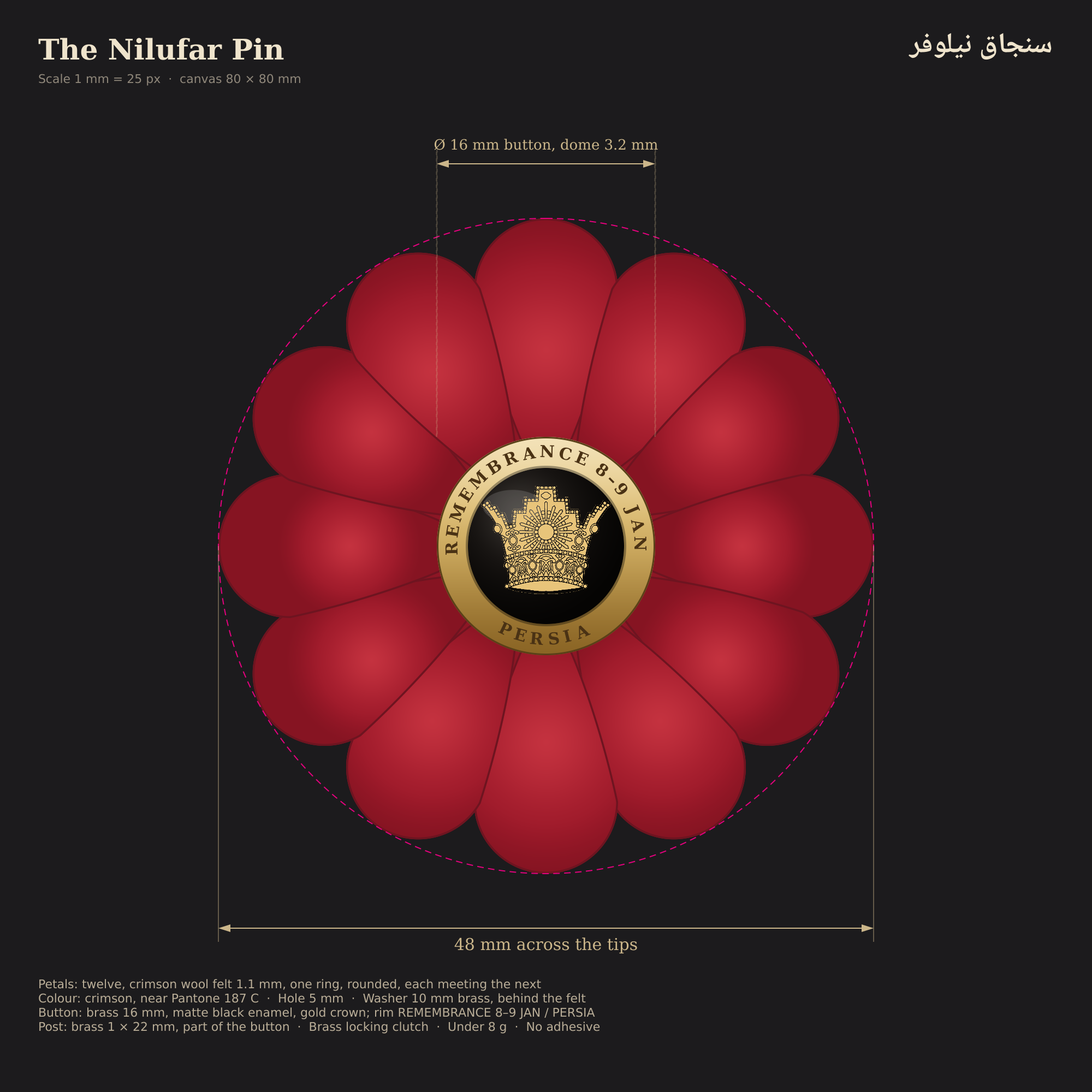
<style>
.page{position:relative;width:1092px;height:1092px;background:#1c1b1d}
.page>*{position:absolute;margin:0}
.t1{font:28.4px "Noto Naskh Arabic";color:#efe4cc}
.t2{font:28.4px "DejaVuSerif-Bold";color:#efe4cc}
.t3{font:12px "DejaVuSans";color:#8f877a}
.t4{font:14.2px "DejaVuSerif";color:#cbb68a}
.t5{font:16.4px "DejaVuSerif-Bold";color:#4a3214}
.t6{font:16.4px "DejaVuSerif";color:#cbb68a}
.t7{font:12px "DejaVuSans";color:#b9ad97}
</style>
<div class="page">
<p class="t1" style="left:907px;top:22px;width:147px;height:50px">سنجاق نیلوفر</p>
<p class="t2" style="left:38px;top:33px;width:248px;height:35px">The Nilufar Pin</p>
<p class="t3" style="left:38px;top:72px;width:264px;height:15px">Scale 1 mm = 25 px  ·  canvas 80 × 80 mm</p>
<p class="t4" style="left:404px;top:136px;width:284px;height:22px">Ø 16 mm button, dome 3.2 mm</p>
<p class="t5" style="left:523px;top:447px;width:14px;height:14px;rotate:-10deg">A</p>
<p class="t5" style="left:540px;top:445px;width:14px;height:13px;rotate:1deg">N</p>
<p class="t5" style="left:559px;top:447px;width:13px;height:13px;rotate:12deg">C</p>
<p class="t5" style="left:485px;top:460px;width:16px;height:16px;rotate:-33deg">B</p>
<p class="t5" style="left:502px;top:452px;width:17px;height:14px;rotate:-22deg">R</p>
<p class="t5" style="left:574px;top:450px;width:15px;height:16px;rotate:23deg">E</p>
<p class="t5" style="left:468px;top:470px;width:21px;height:20px;rotate:-45deg">M</p>
<p class="t5" style="left:596px;top:463px;width:12px;height:14px;rotate:37deg">8</p>
<p class="t5" style="left:608px;top:477px;width:7px;height:7px;rotate:45deg">–</p>
<p class="t5" style="left:614px;top:483px;width:14px;height:12px;rotate:53deg">9</p>
<p class="t5" style="left:458px;top:487px;width:16px;height:16px;rotate:-57deg">E</p>
<p class="t5" style="left:449px;top:502px;width:17px;height:21px;rotate:-69deg">M</p>
<p class="t5" style="left:623px;top:504px;width:17px;height:10px;rotate:67deg">J</p>
<p class="t5" style="left:631px;top:520px;width:13px;height:13px;rotate:78deg">A</p>
<p class="t5" style="left:446px;top:525px;width:14px;height:13px;rotate:-81deg">E</p>
<p class="t5" style="left:445px;top:541px;width:13px;height:14px;rotate:-91deg">R</p>
<p class="t5" style="left:634px;top:537px;width:12px;height:13px;rotate:89deg">N</p>
<p class="t5" style="left:498px;top:621px;width:14px;height:14px;rotate:26deg">P</p>
<p class="t5" style="left:513px;top:627px;width:14px;height:15px;rotate:16deg">E</p>
<p class="t5" style="left:562px;top:629px;width:10px;height:14px;rotate:-14deg">I</p>
<p class="t5" style="left:578px;top:625px;width:13px;height:15px;rotate:-23deg">A</p>
<p class="t5" style="left:530px;top:632px;width:13px;height:13px;rotate:5deg">R</p>
<p class="t5" style="left:549px;top:632px;width:10px;height:13px;rotate:-5deg">S</p>
<p class="t6" style="left:437px;top:935px;width:218px;height:24px">48 mm across the tips</p>
<p class="t7" style="left:38px;top:977px;width:1016px;height:99px">Petals: twelve, crimson wool felt 1.1 mm, one ring, rounded, each meeting the next<br>Colour: crimson, near Pantone 187 C  ·  Hole 5 mm  ·  Washer 10 mm brass, behind the felt<br>Button: brass 16 mm, matte black enamel, gold crown; rim REMEMBRANCE 8–9 JAN / PERSIA<br>Post: brass 1 × 22 mm, part of the button  ·  Brass locking clutch  ·  Under 8 g  ·  No adhesive</p>
</div>
